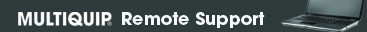
<style>
.page{position:relative;width:367px;height:32px;background:#2f3a3b}
.page>*{position:absolute;margin:0}
.t1{font:17.5px "ITCAvantGardePro-Bold";color:#f5f8fd}
</style>
<div class="page">
<p class="t1" style="left:122px;top:12px;width:143px;height:16px">Remote Support</p>
</div>
